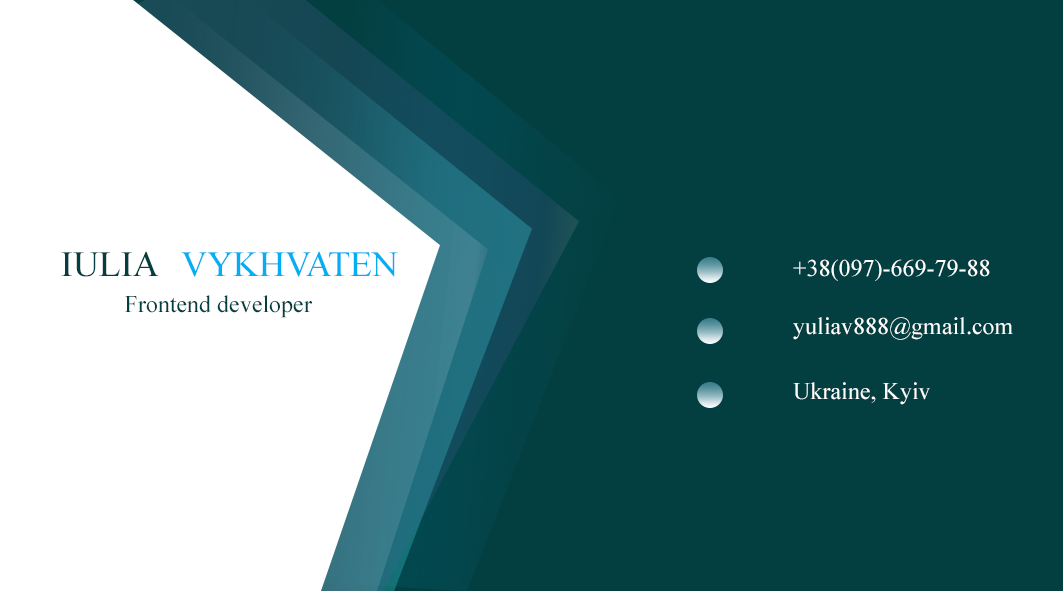
<style>
.page{position:relative;width:1063px;height:591px;background:#033f41}
.page>*{position:absolute;margin:0}
.t1{font:36px "TimesNewRomanPSMT";color:#033f41}
.t2{font:36px "TimesNewRomanPSMT";color:#04aef2}
.t3{font:24px "TimesNewRomanPSMT";color:#ffffff}
.t4{font:24px "TimesNewRomanPSMT";color:#033f41}
</style>
<div class="page">
<p class="t1" style="left:61px;top:251px;width:98px;height:26px">IULIA</p>
<p class="t2" style="left:181px;top:251px;width:217px;height:26px">VYKHVATEN</p>
<p class="t3" style="left:793px;top:259px;width:197px;height:22px">+38(097)-669-79-88</p>
<p class="t4" style="left:124px;top:295px;width:188px;height:23px">Frontend developer</p>
<p class="t3" style="left:793px;top:317px;width:220px;height:23px">yuliav888@gmail.com</p>
<p class="t3" style="left:793px;top:382px;width:137px;height:23px">Ukraine, Kyiv</p>
</div>
